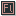
<style>
.page{position:relative;width:16px;height:16px;background:#262f32}
.page>*{position:absolute;margin:0}
.t1{font:12px "Calibri";color:#c5908b}
</style>
<div class="page">
<p class="t1" style="left:4px;top:4px;width:7px;height:8px">Fl</p>
</div>
